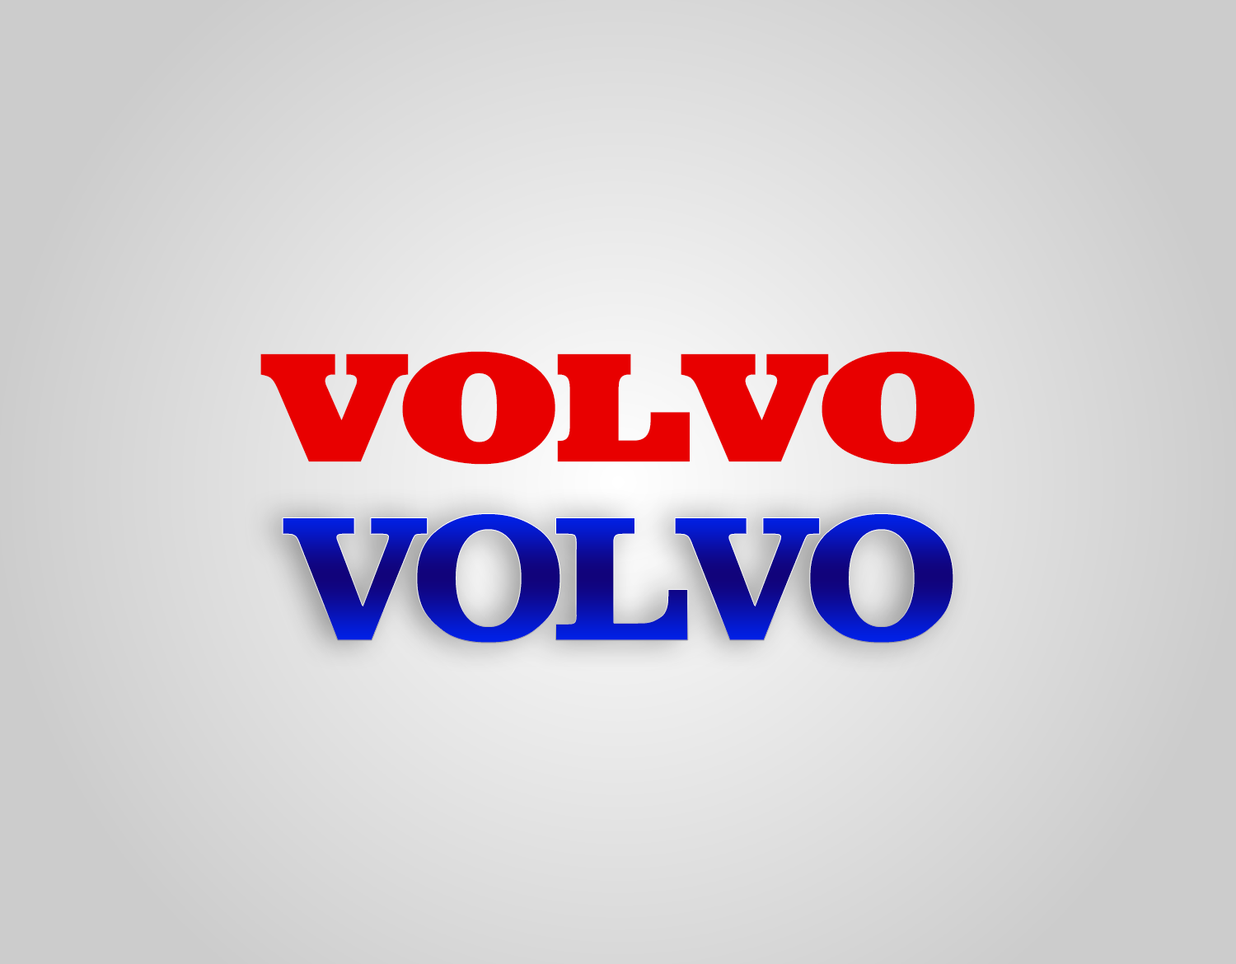
<style>
.page{position:relative;width:1236px;height:964px}
.page>*{position:absolute;margin:0}
.t1{font:161.1px "EgyptianEF-BoldExtended";letter-spacing:-0.06em;color:#e80000}
.t2{font:169.6px "Clarendon-Bold";letter-spacing:-0.06em}
</style>
<div class="page">
<p class="t1" style="left:260px;top:351px;width:715px;height:114px">VOLVO</p>
<p class="t2" style="left:283px;top:514px;width:671px;height:129px">VOLVO</p>
</div>
